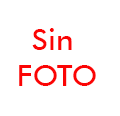
<style>
.page{position:relative;width:120px;height:116px;background:#ffffff}
.page>*{position:absolute;margin:0}
.t1{font:30px "FuturaBT-Medium";color:#fb0404}
</style>
<div class="page">
<p class="t1" style="left:19px;top:28px;width:77px;height:58px;text-align:center">Sin <br>FOTO</p>
</div>
